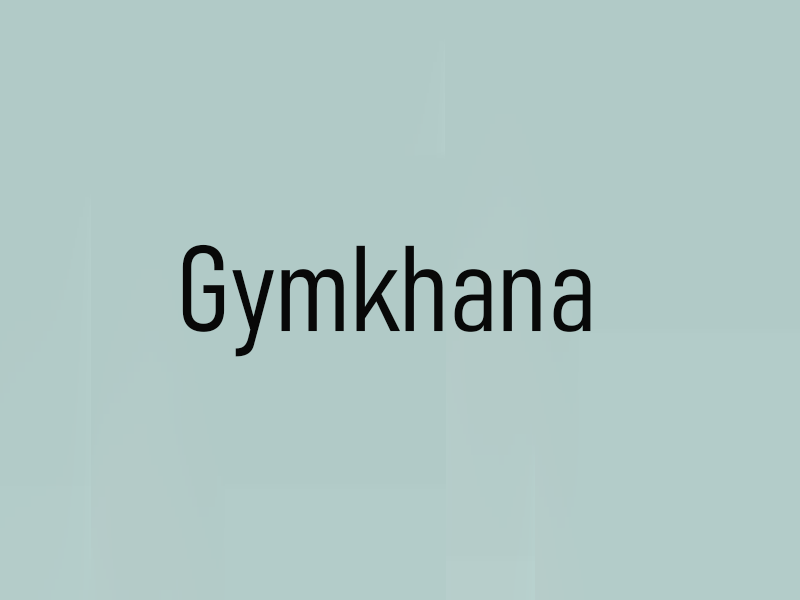
<style>
.page{position:relative;width:800px;height:600px;background:#b1cac7}
.page>*{position:absolute;margin:0}
.t1{font:120px "Bahnschrift-LightCondensed";color:#080808}
</style>
<div class="page">
<p class="t1" style="left:182px;top:244px;width:409px;height:113px">Gymkhana</p>
</div>
